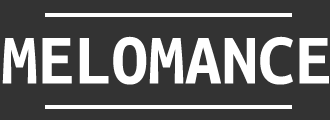
<style>
.page{position:relative;width:330px;height:120px;background:#333333}
.page>*{position:absolute;margin:0}
.t1{font:73.5px "UbuntuMono-Bold";color:#ffffff}
</style>
<div class="page">
<p class="t1" style="left:2px;top:36px;width:327px;height:49px">MELOMANCE</p>
</div>
